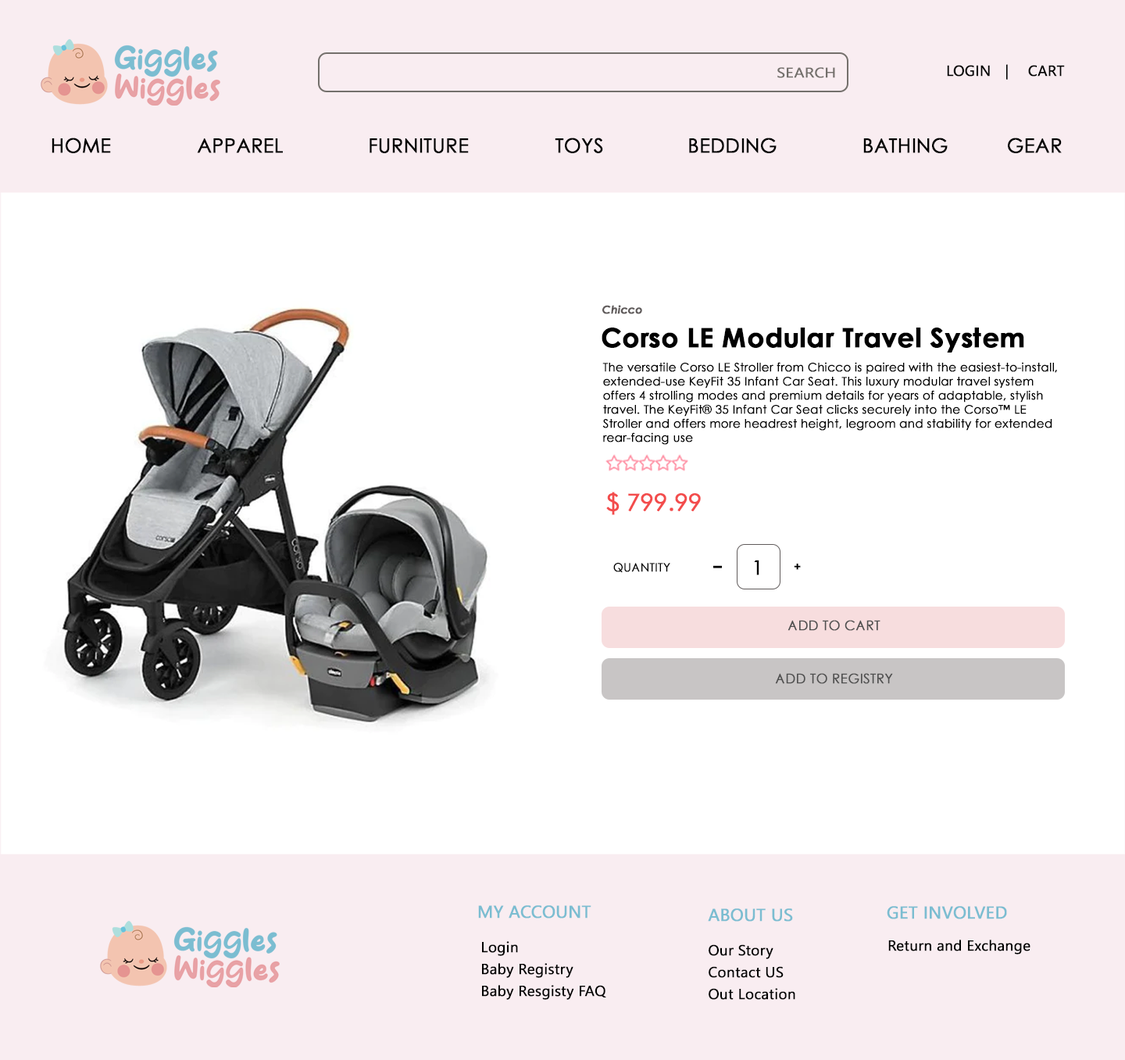
<style>
.page{position:relative;width:1125px;height:1060px;background:#ffffff}
.page>*{position:absolute;margin:0}
.t1{font:19.5px "CenturyGothic";color:#000000;font-weight:bold}
.t2{font:10.9px "CenturyGothic-BoldItalic";color:#605b5b;font-weight:bold}
.t3{font:26.6px "CenturyGothic-Bold";color:#000000;font-weight:bold}
.t4{font:11.7px "CenturyGothic";color:#000000;font-weight:bold}
.t5{font:23.4px "CenturyGothic";color:#f34c4c;font-weight:bold}
.t6{font:28.4px "CenturyGothic";color:#000000;font-weight:bold}
.t7{font:19.9px "CenturyGothic";color:#000000;font-weight:bold}
.t8{font:11.7px "CenturyGothic-Bold";color:#000000;font-weight:bold}
.t9{font:13.3px "CenturyGothic";color:#505050;font-weight:bold}
</style>
<div class="page">
<p class="t1" style="left:52px;top:138px;width:59px;height:15px">HOME</p>
<p class="t1" style="left:555px;top:138px;width:48px;height:15px">TOYS</p>
<p class="t1" style="left:689px;top:138px;width:88px;height:15px">BEDDING</p>
<p class="t1" style="left:864px;top:138px;width:84px;height:15px">BATHING</p>
<p class="t1" style="left:1008px;top:138px;width:54px;height:15px">GEAR</p>
<p class="t1" style="left:197px;top:138px;width:86px;height:15px">APPAREL</p>
<p class="t1" style="left:370px;top:138px;width:99px;height:15px">FURNITURE</p>
<p class="t2" style="left:603px;top:305px;width:39px;height:9px">Chicco</p>
<p class="t3" style="left:602px;top:327px;width:422px;height:25px">Corso LE Modular Travel System</p>
<p class="t4" style="left:603px;top:362px;width:454px;height:83px">The versatile Corso LE Stroller from Chicco is paired with the easiest-to-install, extended-use KeyFit 35 Infant Car Seat. This luxury modular travel system offers 4 strolling modes and premium details for years of adaptable, stylish travel. The KeyFit® 35 Infant Car Seat clicks securely into the Corso™ LE Stroller and offers more headrest height, legroom and stability for extended rear-facing use</p>
<p class="t5" style="left:606px;top:492px;width:95px;height:23px">$ 799.99</p>
<p class="t4" style="left:613px;top:563px;width:57px;height:9px">QUANTITY</p>
<p class="t6" style="left:713px;top:565px;width:9px;height:3px">-</p>
<p class="t7" style="left:754px;top:560px;width:6px;height:15px">1</p>
<p class="t8" style="left:794px;top:563px;width:7px;height:7px">+</p>
<p class="t9" style="left:788px;top:620px;width:93px;height:11px">ADD TO CART</p>
<p class="t9" style="left:775px;top:673px;width:118px;height:11px">ADD TO REGISTRY</p>
</div>
